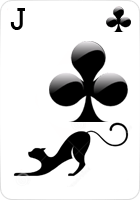
<style>
.page{position:relative;width:140px;height:200px;background:#ffffff}
.page>*{position:absolute;margin:0}
.t1{font:26px "CardCharacters";color:#000000}
</style>
<div class="page">
<p class="t1" style="left:10px;top:8px;width:15px;height:22px">J</p>
</div>
